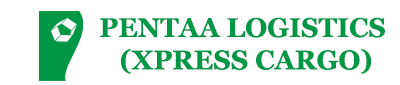
<style>
.page{position:relative;width:400px;height:85px;background:#ffffff}
.page>*{position:absolute;margin:0}
.t1{font:27px "Georgia-Bold";color:#009746}
</style>
<div class="page">
<p class="t1" style="left:100px;top:17px;width:285px;height:57px;text-align:center">PENTAA LOGISTICS <br>(XPRESS CARGO)</p>
</div>
